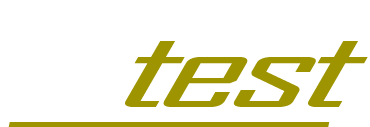
<style>
.page{position:relative;width:370px;height:127px;background:#ffffff}
.page>*{position:absolute;margin:0}
.t1{font:108.6px "AgencyFB-Reg";letter-spacing:-0.059em;color:#9d9400;font-style:italic;text-decoration:underline;scale:2.08 1}
</style>
<div class="page">
<p class="t1" style="left:8px;top:41px;width:360px;height:86px">test</p>
</div>
